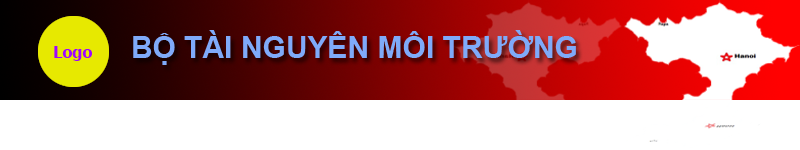
<style>
.page{position:relative;width:800px;height:150px;background:#ffffff}
.page>*{position:absolute;margin:0}
.t1{font:30px "Arial-BoldMT";color:#7faaf9}
.t2{font:16px "Tahoma-Bold";color:#9e06ff}
</style>
<div class="page">
<p class="t1" style="left:133px;top:30px;width:443px;height:35px">BỘ TÀI NGUYÊN MÔI TRƯỜNG</p>
<p class="t2" style="left:54px;top:46px;width:38px;height:15px">Logo</p>
</div>
